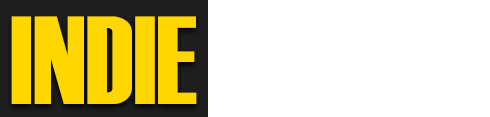
<style>
.page{position:relative;width:490px;height:117px;background:#ffffff}
.page>*{position:absolute;margin:0}
.t1{font:125px "Haettenschweiler";color:#ffd700}
</style>
<div class="page">
<p class="t1" style="left:11px;top:16px;width:186px;height:88px">INDIE</p>
</div>
